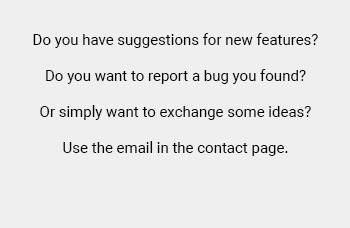
<style>
.page{position:relative;width:350px;height:228px;background:#efefef}
.page>*{position:absolute;margin:0}
.t1{font:15px "Roboto-Regular";color:#000000}
</style>
<div class="page">
<p class="t1" style="left:33px;top:33px;width:285px;height:123px;text-align:justify">Do you have suggestions for new features?<br><br>Do you want to report a bug you found?<br><br>Or simply want to exchange some ideas?<br><br>Use the email in the contact page.</p>
</div>
